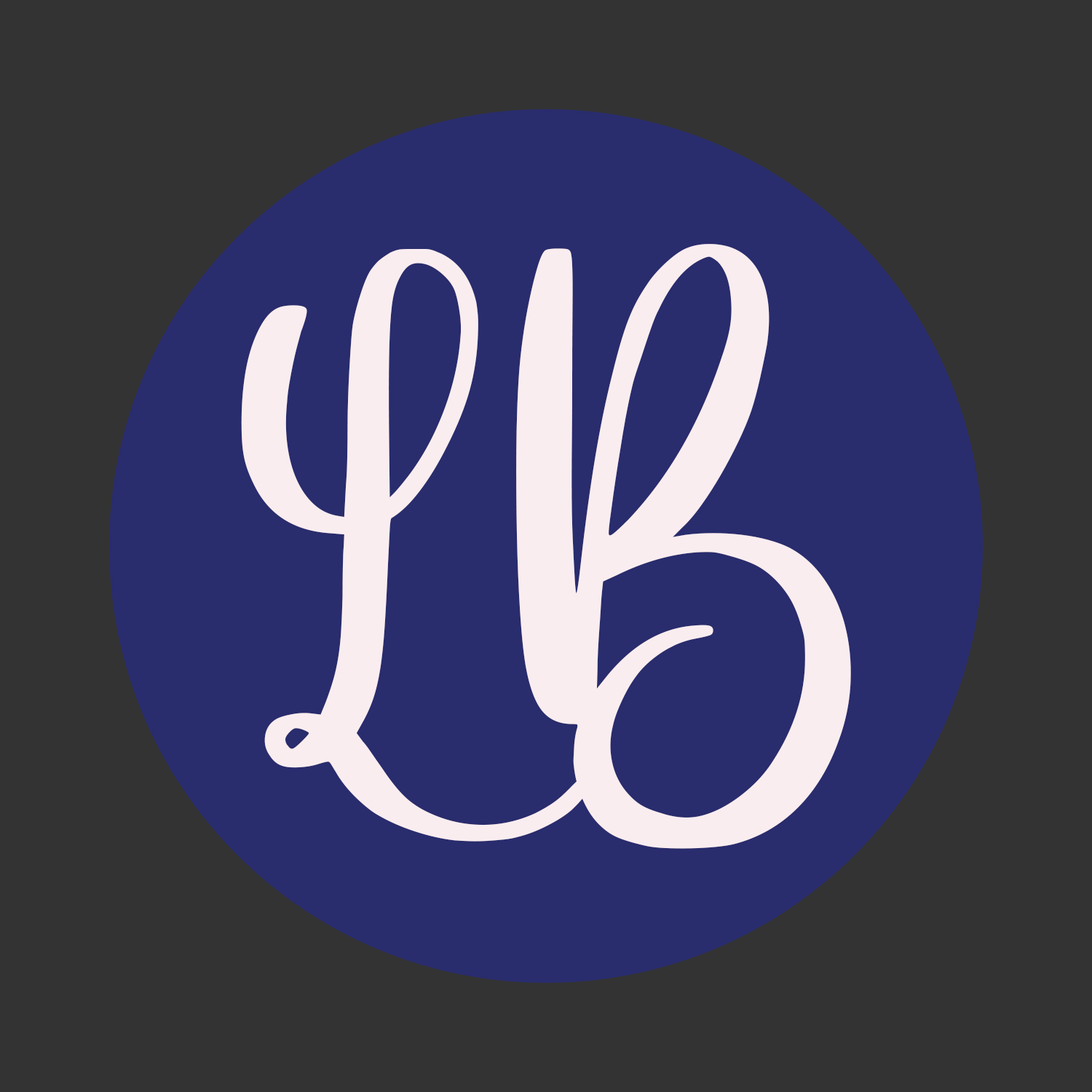
<style>
.page{position:relative;width:1092px;height:1092px;background:#333333}
.page>*{position:absolute;margin:0}
.t1{font:561.2px "Annamellia";color:#faedf0;text-transform:uppercase}
</style>
<div class="page">
<p class="t1" style="left:516px;top:244px;width:335px;height:605px">B</p>
<p class="t1" style="left:241px;top:249px;width:352px;height:593px">L</p>
</div>
